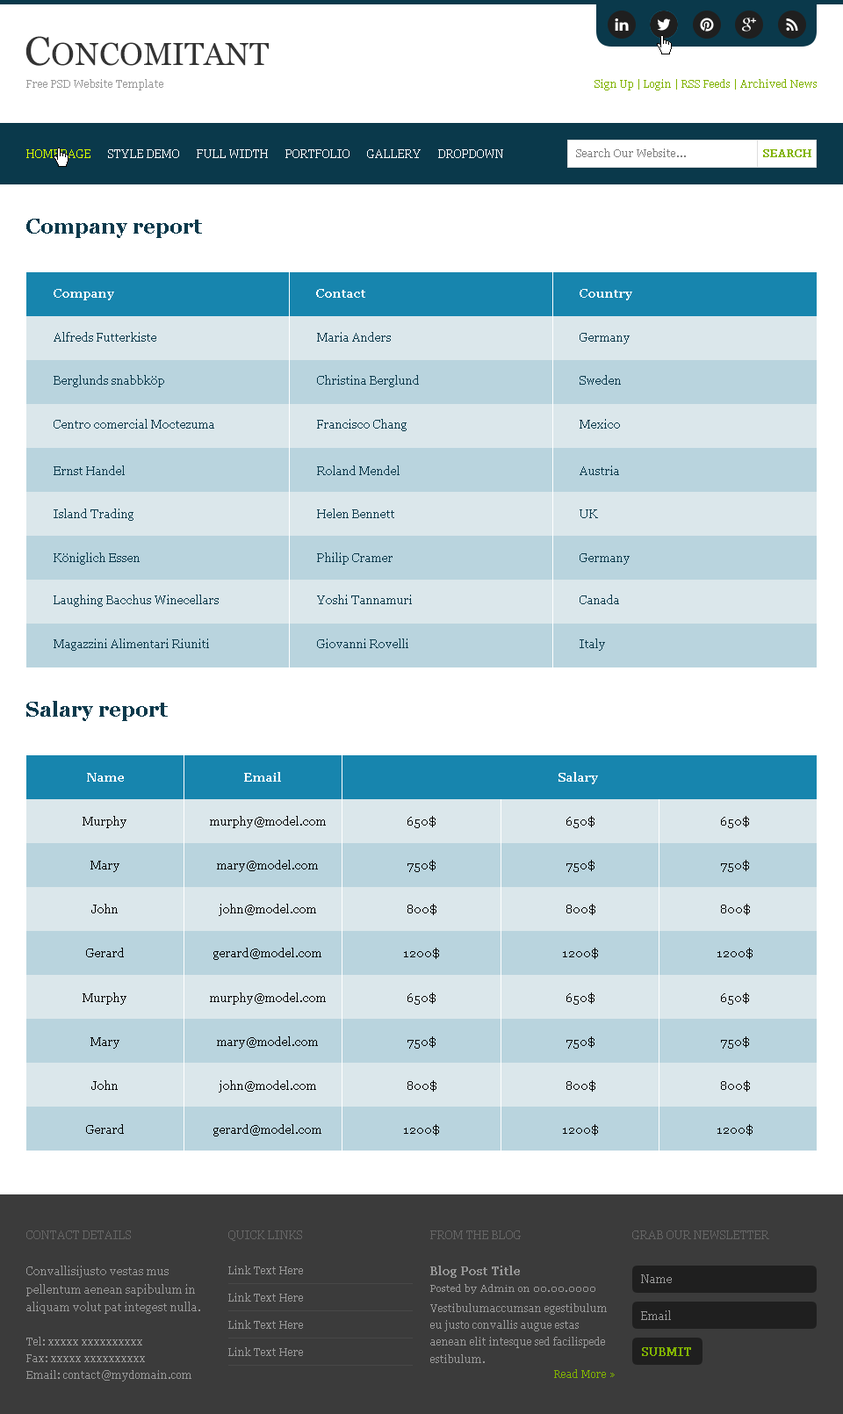
<style>
.page{position:relative;width:843px;height:1414px;background:#ffffff}
.page>*{position:absolute;margin:0}
.t1{font:31.6px "Georgia";color:#333333}
.t2{font:40.4px "Georgia";color:#333333}
.t3{font:10.5px "Georgia";color:#999999}
.t4{font:10.5px "Georgia";color:#81b300}
.t5{font:11.4px "Georgia";color:#d8ff00}
.t6{font:11.4px "Georgia";color:#ffffff}
.t7{font:10.5px "Georgia";color:#7f7f7f}
.t8{font:10.5px "Georgia";color:#81b300;font-weight:bold}
.t9{font:21.1px "Georgia-Bold";color:#0a394b}
.t10{font:12.3px "Georgia-Bold";color:#ffffff}
.t11{font:12.3px "Georgia";color:#0a394b}
.t12{font:12.3px "Georgia";color:#000000}
.t13{font:11.4px "Georgia";color:#666666}
.t14{font:11.4px/18.3px "Georgia";color:#999999}
.t15{font:10.5px/16.9px "Georgia";color:#999999}
.t16{font:11.4px "Georgia";color:#999999;font-weight:bold}
.t17{font:11.4px "Georgia";color:#999999}
.t18{font:9.7px "Georgia";color:#999999}
.t19{font:11.4px "Georgia";color:#81b300;font-weight:bold}
</style>
<div class="page">
<p class="t1" style="left:25px;top:36px;width:244px;height:30px"><span class="t2">C</span>ONCOMITANT</p>
<p class="t3" style="left:26px;top:79px;width:137px;height:11px">Free PSD Website Template</p>
<p class="t4" style="left:595px;top:79px;width:222px;height:11px">Sign Up | Login | RSS Feeds | Archived News</p>
<p class="t5" style="left:26px;top:149px;width:64px;height:9px">HOMEPAGE</p>
<p class="t6" style="left:108px;top:149px;width:71px;height:9px">STYLE DEMO</p>
<p class="t6" style="left:197px;top:149px;width:71px;height:9px">FULL WIDTH</p>
<p class="t6" style="left:285px;top:149px;width:65px;height:9px">PORTFOLIO</p>
<p class="t6" style="left:367px;top:149px;width:54px;height:9px">GALLERY</p>
<p class="t6" style="left:438px;top:149px;width:65px;height:9px">DROPDOWN</p>
<p class="t7" style="left:576px;top:148px;width:110px;height:9px">Search Our Website...</p>
<p class="t8" style="left:763px;top:149px;width:49px;height:8px">SEARCH</p>
<p class="t9" style="left:26px;top:219px;width:176px;height:19px">Company report</p>
<p class="t10" style="left:54px;top:289px;width:60px;height:11px">Company</p>
<p class="t10" style="left:316px;top:289px;width:49px;height:9px">Contact</p>
<p class="t10" style="left:580px;top:289px;width:52px;height:11px">Country</p>
<p class="t11" style="left:54px;top:332px;width:102px;height:10px">Alfreds Futterkiste</p>
<p class="t11" style="left:317px;top:332px;width:74px;height:10px">Maria Anders</p>
<p class="t11" style="left:580px;top:333px;width:50px;height:11px">Germany</p>
<p class="t11" style="left:54px;top:375px;width:110px;height:12px">Berglunds snabbköp</p>
<p class="t11" style="left:317px;top:375px;width:102px;height:12px">Christina Berglund</p>
<p class="t11" style="left:580px;top:375px;width:41px;height:10px">Sweden</p>
<p class="t11" style="left:54px;top:419px;width:160px;height:10px">Centro comercial Moctezuma</p>
<p class="t11" style="left:317px;top:419px;width:90px;height:12px">Francisco Chang</p>
<p class="t11" style="left:580px;top:419px;width:40px;height:10px">Mexico</p>
<p class="t11" style="left:54px;top:466px;width:71px;height:9px">Ernst Handel</p>
<p class="t11" style="left:317px;top:466px;width:83px;height:9px">Roland Mendel</p>
<p class="t11" style="left:580px;top:466px;width:39px;height:9px">Austria</p>
<p class="t11" style="left:54px;top:509px;width:80px;height:12px">Island Trading</p>
<p class="t11" style="left:317px;top:509px;width:77px;height:9px">Helen Bennett</p>
<p class="t11" style="left:580px;top:509px;width:18px;height:9px">UK</p>
<p class="t11" style="left:54px;top:552px;width:86px;height:13px">Königlich Essen</p>
<p class="t11" style="left:317px;top:552px;width:76px;height:13px">Philip Cramer</p>
<p class="t11" style="left:580px;top:553px;width:50px;height:12px">Germany</p>
<p class="t11" style="left:54px;top:595px;width:165px;height:12px">Laughing Bacchus Winecellars</p>
<p class="t11" style="left:317px;top:595px;width:95px;height:9px">Yoshi Tannamuri</p>
<p class="t11" style="left:580px;top:595px;width:39px;height:9px">Canada</p>
<p class="t11" style="left:54px;top:639px;width:155px;height:12px">Magazzini Alimentari Riuniti</p>
<p class="t11" style="left:317px;top:639px;width:91px;height:9px">Giovanni Rovelli</p>
<p class="t11" style="left:580px;top:639px;width:25px;height:12px">Italy</p>
<p class="t9" style="left:26px;top:701px;width:142px;height:20px">Salary report</p>
<p class="t10" style="left:87px;top:773px;width:37px;height:9px">Name</p>
<p class="t10" style="left:244px;top:772px;width:37px;height:10px">Email</p>
<p class="t10" style="left:559px;top:772px;width:39px;height:12px">Salary</p>
<p class="t12" style="left:83px;top:816px;width:43px;height:12px">Murphy</p>
<p class="t12" style="left:210px;top:816px;width:116px;height:12px">murphy@model.com</p>
<p class="t12" style="left:408px;top:816px;width:28px;height:12px">650$</p>
<p class="t12" style="left:567px;top:816px;width:28px;height:12px">650$</p>
<p class="t12" style="left:721px;top:816px;width:28px;height:12px">650$</p>
<p class="t12" style="left:90px;top:861px;width:29px;height:11px">Mary</p>
<p class="t12" style="left:217px;top:860px;width:101px;height:12px">mary@model.com</p>
<p class="t12" style="left:408px;top:860px;width:28px;height:12px">750$</p>
<p class="t12" style="left:567px;top:860px;width:28px;height:12px">750$</p>
<p class="t12" style="left:721px;top:860px;width:28px;height:12px">750$</p>
<p class="t12" style="left:91px;top:904px;width:27px;height:9px">John</p>
<p class="t12" style="left:219px;top:904px;width:97px;height:12px">john@model.com</p>
<p class="t12" style="left:408px;top:904px;width:29px;height:11px">800$</p>
<p class="t12" style="left:567px;top:904px;width:29px;height:11px">800$</p>
<p class="t12" style="left:721px;top:904px;width:29px;height:11px">800$</p>
<p class="t12" style="left:86px;top:948px;width:38px;height:9px">Gerard</p>
<p class="t12" style="left:213px;top:948px;width:108px;height:12px">gerard@model.com</p>
<p class="t12" style="left:404px;top:948px;width:35px;height:11px">1200$</p>
<p class="t12" style="left:563px;top:948px;width:35px;height:11px">1200$</p>
<p class="t12" style="left:718px;top:948px;width:35px;height:11px">1200$</p>
<p class="t12" style="left:83px;top:993px;width:43px;height:12px">Murphy</p>
<p class="t12" style="left:210px;top:993px;width:116px;height:12px">murphy@model.com</p>
<p class="t12" style="left:408px;top:993px;width:28px;height:12px">650$</p>
<p class="t12" style="left:567px;top:993px;width:28px;height:12px">650$</p>
<p class="t12" style="left:721px;top:993px;width:28px;height:12px">650$</p>
<p class="t12" style="left:90px;top:1037px;width:29px;height:12px">Mary</p>
<p class="t12" style="left:217px;top:1036px;width:101px;height:13px">mary@model.com</p>
<p class="t12" style="left:408px;top:1036px;width:28px;height:13px">750$</p>
<p class="t12" style="left:567px;top:1036px;width:28px;height:13px">750$</p>
<p class="t12" style="left:721px;top:1036px;width:28px;height:13px">750$</p>
<p class="t12" style="left:91px;top:1080px;width:27px;height:10px">John</p>
<p class="t12" style="left:219px;top:1080px;width:97px;height:13px">john@model.com</p>
<p class="t12" style="left:408px;top:1080px;width:29px;height:12px">800$</p>
<p class="t12" style="left:567px;top:1080px;width:29px;height:12px">800$</p>
<p class="t12" style="left:721px;top:1080px;width:29px;height:12px">800$</p>
<p class="t12" style="left:86px;top:1124px;width:38px;height:10px">Gerard</p>
<p class="t12" style="left:213px;top:1124px;width:108px;height:13px">gerard@model.com</p>
<p class="t12" style="left:404px;top:1124px;width:35px;height:12px">1200$</p>
<p class="t12" style="left:563px;top:1124px;width:35px;height:12px">1200$</p>
<p class="t12" style="left:718px;top:1124px;width:35px;height:12px">1200$</p>
<p class="t13" style="left:26px;top:1231px;width:105px;height:8px">CONTACT DETAILS</p>
<p class="t13" style="left:228px;top:1231px;width:74px;height:10px">QUICK LINKS</p>
<p class="t13" style="left:430px;top:1231px;width:91px;height:8px">FROM THE BLOG</p>
<p class="t13" style="left:632px;top:1231px;width:137px;height:8px">GRAB OUR NEWSLETTER</p>
<p class="t14" style="left:26px;top:1266px;width:174px;height:116px">Convallisijusto vestas mus pellentum aenean sapibulum in aliquam volut pat integest nulla. <br><span class="t15"><br>Tel: xxxxx xxxxxxxxxx<br>Fax: xxxxx xxxxxxxxxx<br>Email: contact@mydomain.com</span></p>
<p class="t3" style="left:228px;top:1266px;width:75px;height:8px">Link Text Here</p>
<p class="t16" style="left:430px;top:1266px;width:90px;height:12px">Blog Post Title</p>
<p class="t17" style="left:641px;top:1274px;width:31px;height:9px">Name</p>
<p class="t18" style="left:430px;top:1284px;width:166px;height:10px">Posted by Admin on 00.00.0000</p>
<p class="t3" style="left:228px;top:1293px;width:75px;height:9px">Link Text Here</p>
<p class="t15" style="left:430px;top:1303px;width:177px;height:60px">Vestibulumaccumsan egestibulum eu justo convallis augue estas aenean elit intesque sed facilispede estibulum.</p>
<p class="t17" style="left:641px;top:1311px;width:30px;height:9px">Email</p>
<p class="t3" style="left:228px;top:1320px;width:75px;height:9px">Link Text Here</p>
<p class="t3" style="left:228px;top:1347px;width:75px;height:9px">Link Text Here</p>
<p class="t19" style="left:642px;top:1347px;width:49px;height:9px">SUBMIT</p>
<p class="t4" style="left:554px;top:1369px;width:61px;height:9px">Read More »</p>
</div>
